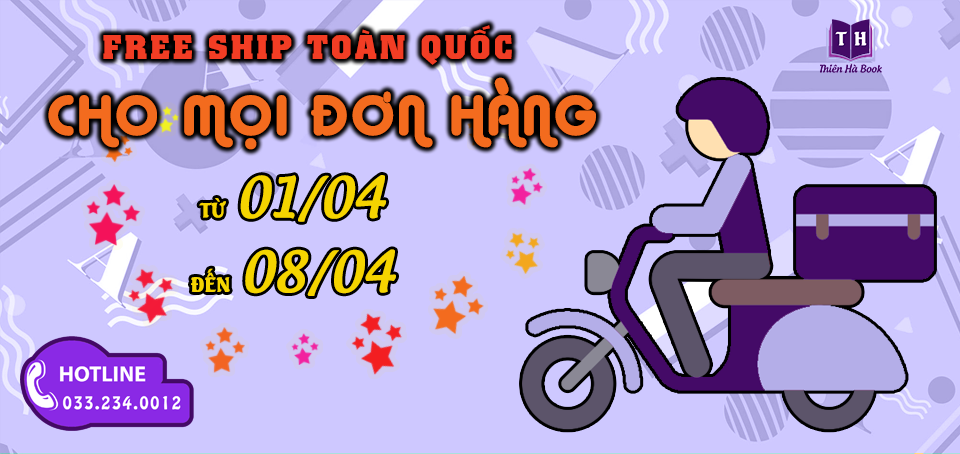
<style>
.page{position:relative;width:960px;height:454px;background:#cec8ff}
.page>*{position:absolute;margin:0}
.t1{font:33.3px "UTM-Colossalis";letter-spacing:0.1em;color:#f23d24}
.t2{font:53.3px "UTM-Alba-Matter";letter-spacing:0.1em;color:#f36b1e}
.t3{font:53.3px/74.4px "UTM-Androgyne";color:#f5d400}
.t4{font:20px/74.4px "UTMSeagullBold";color:#f5d400}
</style>
<div class="page">
<p class="t1" style="left:103px;top:25px;width:409px;height:40px">FREE SHIP TOÀN QUỐC</p>
<p class="t2" style="left:48px;top:77px;width:548px;height:73px">CHO MỌI ĐƠN HÀNG</p>
<p class="t3" style="left:191px;top:175px;width:205px;height:121px;text-align:center"><span class="t4">TỪ  </span>01/04 <br><span class="t4">ĐẾN  </span>08/04</p>
</div>
